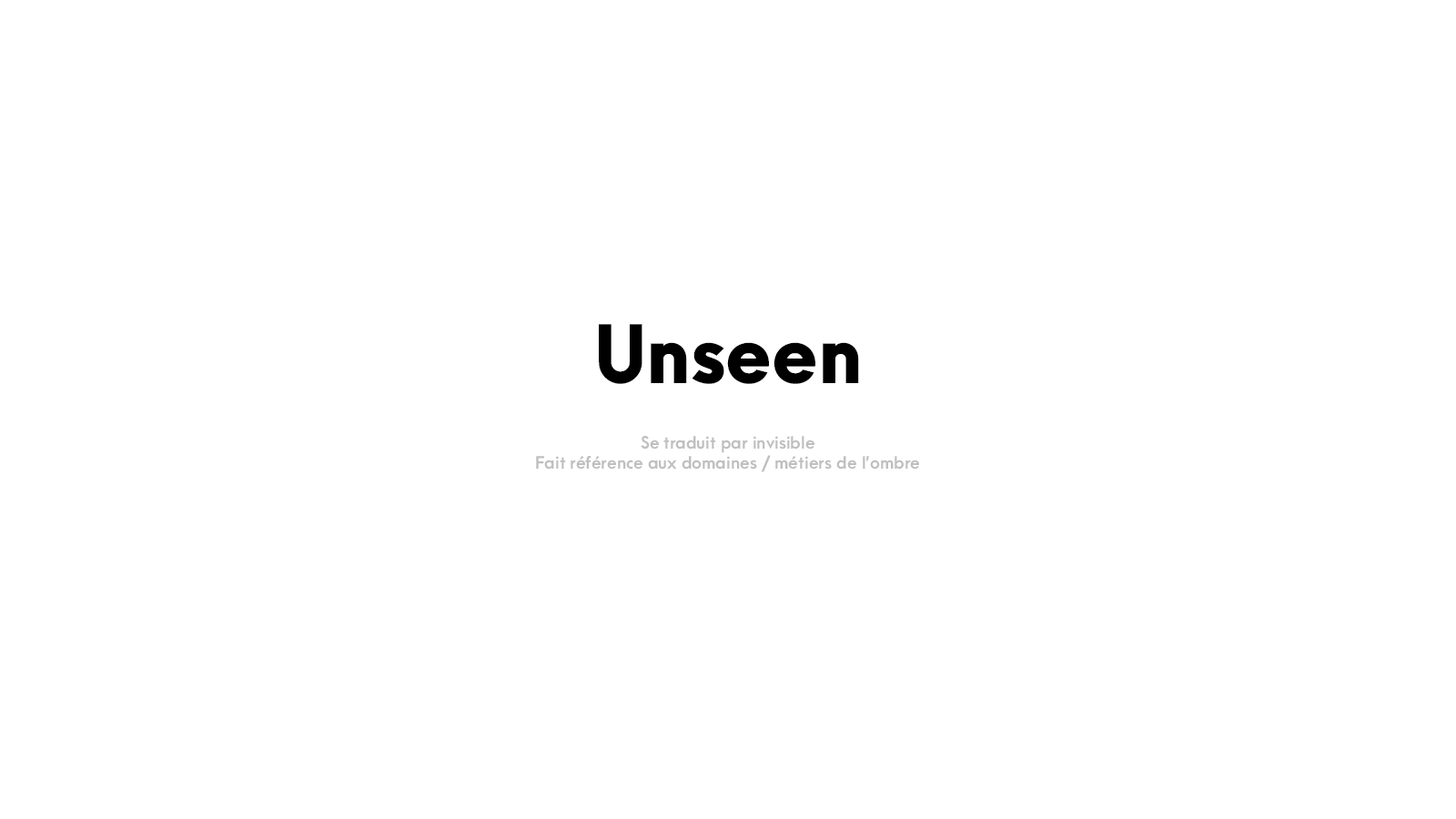
<style>
.page{position:relative;width:1456px;height:819px;background:#ffffff}
.page>*{position:absolute;margin:0}
.t1{font:16.4px/20px "ArcaMajora3-Bold";color:#bfbfbf}
.t2{font:72.8px/43.7px "ArcaMajora3-Heavy";color:#000000}
.t3{font:16.4px/32.8px "ArcaMajora3-Bold";color:#bfbfbf}
</style>
<div class="page">
<p class="t1" style="left:536px;top:324px;width:383px;height:148px;text-align:center"><span class="t2">Unseen<br><br></span><span class="t3">Se </span>traduit par invisible<br>Fait référence aux domaines / métiers de l’ombre</p>
</div>
